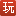
<style>
.page{position:relative;width:16px;height:16px}
.page>*{position:absolute;margin:0}
.t1{font:12px "SimSun";letter-spacing:0.01em;color:#ffffff}
</style>
<div class="page">
<p class="t1" style="left:3px;top:2px;width:11px;height:11px">玩</p>
</div>
